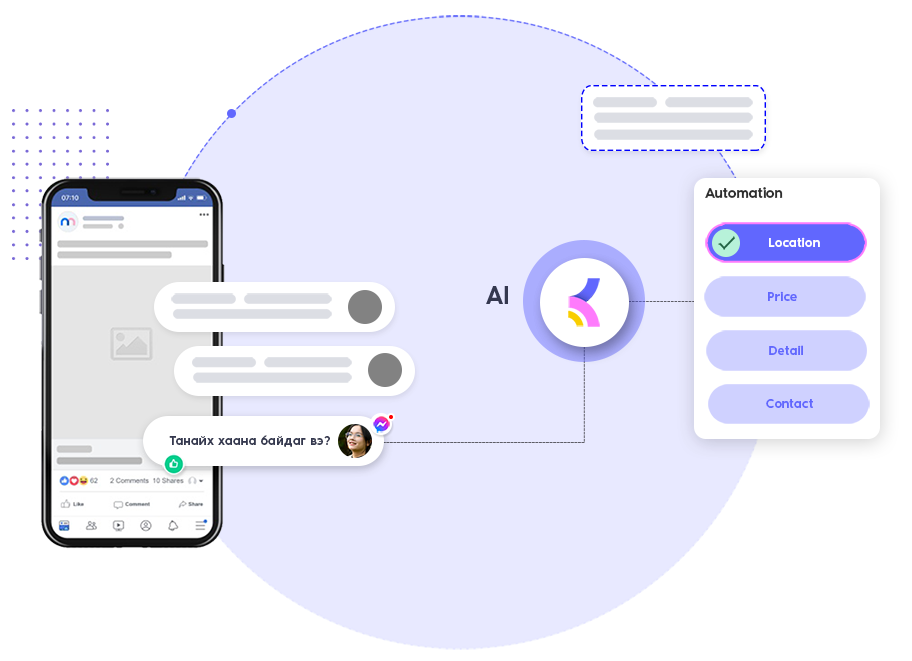
<style>
.page{position:relative;width:912px;height:661px;background:#ffffff}
.page>*{position:absolute;margin:0}
.t1{font:14.8px "NoirPro-Medium";letter-spacing:-0.02em;color:#2e2e2e}
.t2{font:13px "NoirPro-Medium";color:#ffffff}
.t3{font:25.5px "NoirPro-Medium";letter-spacing:-0.02em;color:#34384f}
.t4{font:13px "NoirPro-Medium";color:#6167fe}
.t5{font:13px "NoirPro-Medium";color:#34384f}
</style>
<div class="page">
<p class="t1" style="left:705px;top:187px;width:78px;height:11px">Automation</p>
<p class="t2" style="left:769px;top:237px;width:51px;height:10px">Location</p>
<p class="t3" style="left:486px;top:286px;width:22px;height:18px">AI</p>
<p class="t4" style="left:768px;top:291px;width:29px;height:10px">Price</p>
<p class="t4" style="left:769px;top:345px;width:34px;height:10px">Detail</p>
<p class="t4" style="left:766px;top:399px;width:47px;height:9px">Contact</p>
<p class="t5" style="left:169px;top:435px;width:161px;height:12px">Танайх хаана байдаг вэ?</p>
</div>
